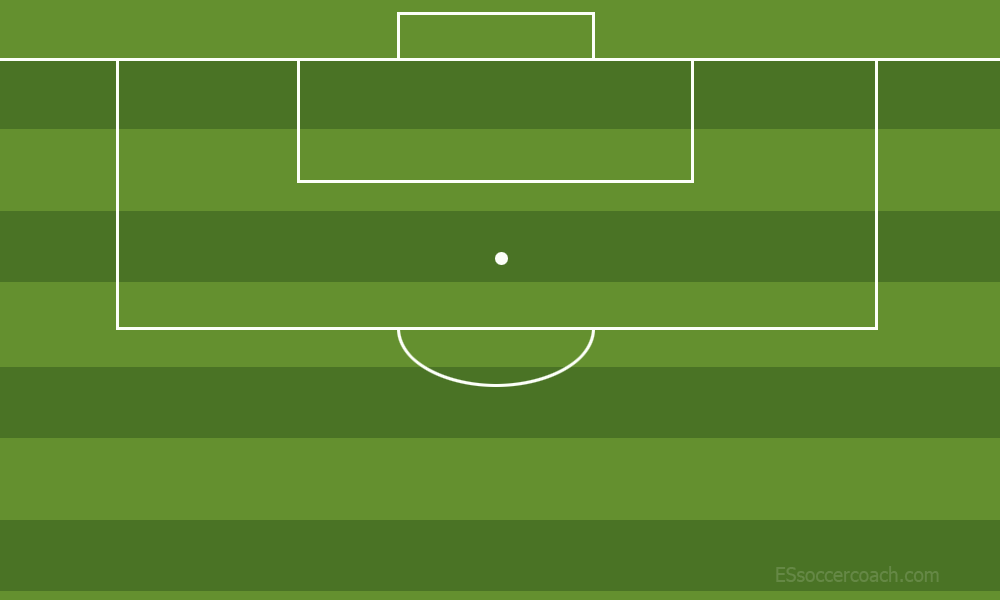
<style>
.page{position:relative;width:1000px;height:600px;background:#64902f}
.page>*{position:absolute;margin:0}
.t1{font:20.3px "Tahoma";color:#658845;scale:0.95 1}
</style>
<div class="page">
<p class="t1" style="left:776px;top:566px;width:163px;height:16px">ESsoccercoach.com</p>
</div>
